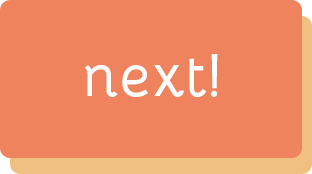
<style>
.page{position:relative;width:312px;height:174px;background:#ee835e}
.page>*{position:absolute;margin:0}
.t1{font:60px "Bellota-Bold";color:#ffffff}
</style>
<div class="page">
<p class="t1" style="left:85px;top:54px;width:133px;height:43px">next!</p>
</div>
